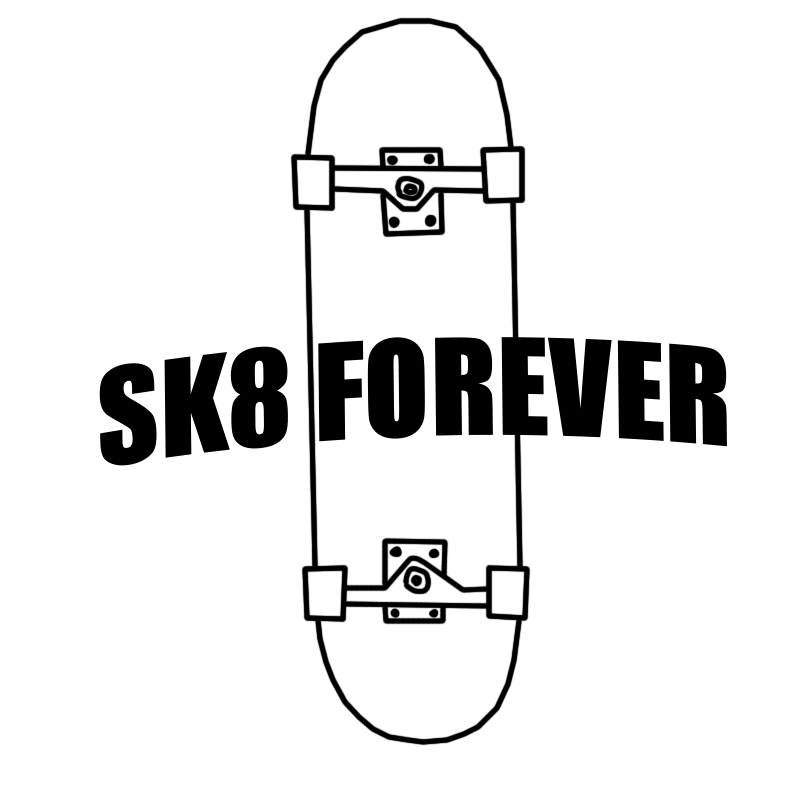
<style>
.page{position:relative;width:800px;height:800px;background:#ffffff}
.page>*{position:absolute;margin:0}
.t1{font:123.4px "Impact";color:#000000}
</style>
<div class="page">
<p class="t1" style="left:99px;top:337px;width:628px;height:129px;rotate:-1deg">SK8 FOREVER</p>
</div>
